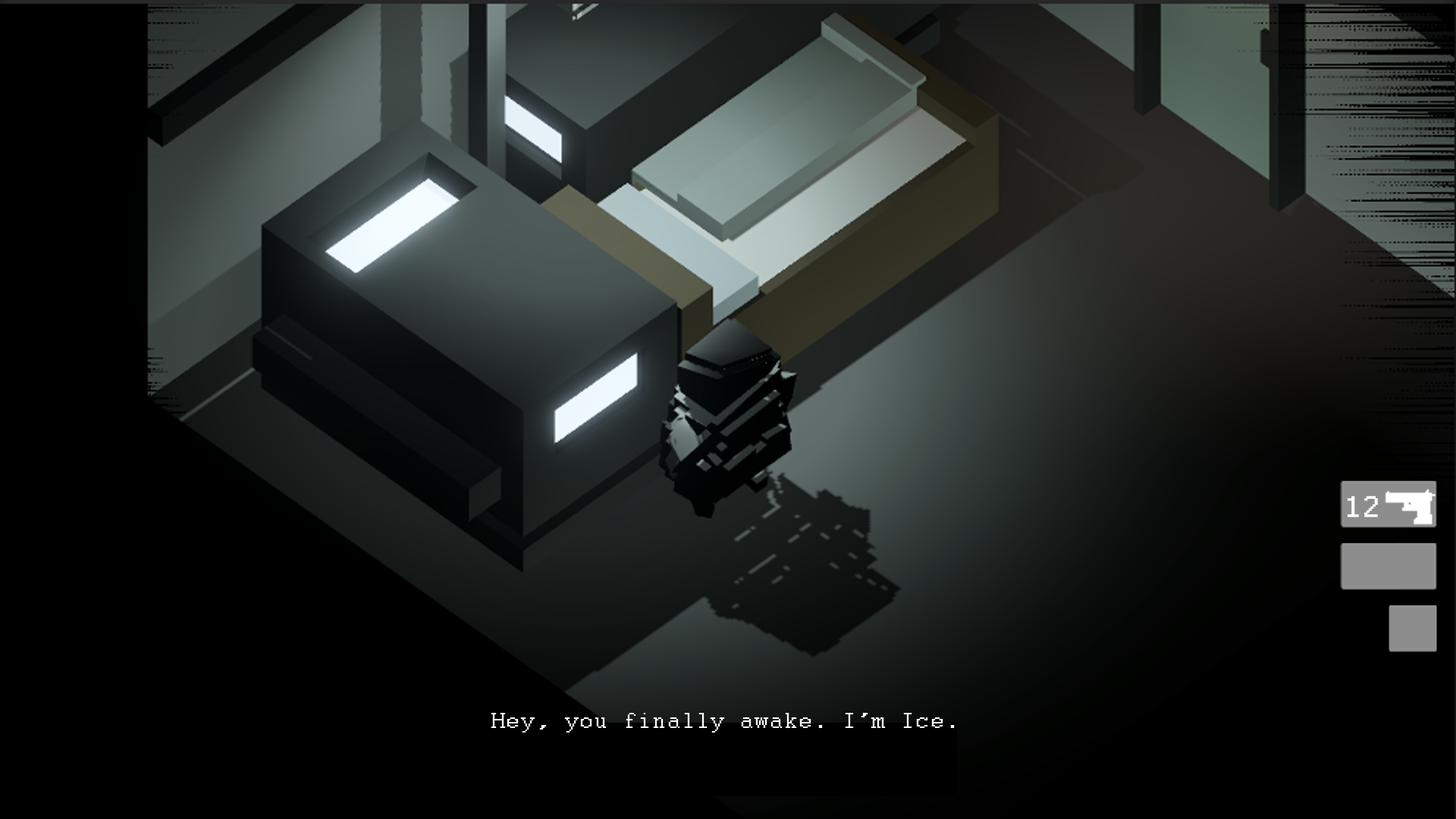
<style>
.page{position:relative;width:1456px;height:819px;background:#000000}
.page>*{position:absolute;margin:0}
.t1{font:32.4px "Courier";letter-spacing:0.04em;color:#ffffff;font-weight:bold}
.t2{font:24.3px "Courier";letter-spacing:0.04em;color:#ffffff}
</style>
<div class="page">
<p class="t1" style="left:1348px;top:496px;width:30px;height:21px">12</p>
<p class="t2" style="left:491px;top:713px;width:464px;height:20px">Hey, you finally awake. I’m Ice.</p>
</div>
